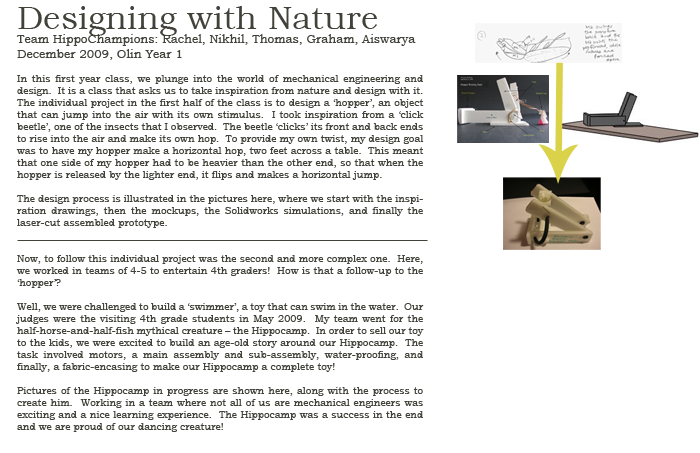
<style>
.page{position:relative;width:700px;height:453px;background:#ffffff}
.page>*{position:absolute;margin:0}
.t1{font:12px "BookmanOldStyle";color:#42423a}
.t2{font:33px "BookmanOldStyle";color:#42423a}
.t3{font:10px "BookmanOldStyle";color:#42423a}
</style>
<div class="page">
<p class="t1" style="left:16px;top:6px;width:400px;height:54px;text-align:justify"><span class="t2">Designing with Nature<br></span>Team HippoChampions: Rachel, Nikhil, Thomas, Graham, Aiswarya<br>December 2009, Olin Year 1</p>
<p class="t3" style="left:16px;top:75px;width:408px;height:357px;text-align:justify">In this first year class, we plunge into the world of mechanical engineering and design.  It is a class that asks us to take inspiration from nature and design with it.  The individual project in the first half of the class is to design a ‘hopper’, an object that can jump into the air with its own stimulus.  I took inspiration from a ‘click beetle’, one of the insects that I observed.  The beetle ‘clicks’ its front and back ends to rise into the air and make its own hop.  To provide my own twist, my design goal was to have my hopper make a horizontal hop, two feet across a table.  This meant that one side of my hopper had to be heavier than the other end, so that when the hopper is released by the lighter end, it flips and makes a horizontal jump.<br><br>The design process is illustrated in the pictures here, where we start with the inspiration drawings, then the mockups, the Solidworks simulations, and finally the laser-cut assembled prototype.<br><br><br>Now, to follow this individual project was the second and more complex one.  Here, we worked in teams of 4-5 to entertain 4th graders!  How is that a follow-up to the ‘hopper’?  <br><br>Well, we were challenged to build a ‘swimmer’, a toy that can swim in the water.  Our judges were the visiting 4th grade students in May 2009.  My team went for the half-horse-and-half-fish mythical creature – the Hippocamp.  In order to sell our toy to the kids, we were excited to build an age-old story around our Hippocamp.  The task involved motors, a main assembly and sub-assembly, water-proofing, and finally, a fabric-encasing to make our Hippocamp a complete toy!<br><br>Pictures of the Hippocamp in progress are shown here, along with the process to create him.  Working in a team where not all of us are mechanical engineers was exciting and a nice learning experience.  The Hippocamp was a success in the end and we are proud of our dancing creature!</p>
</div>
